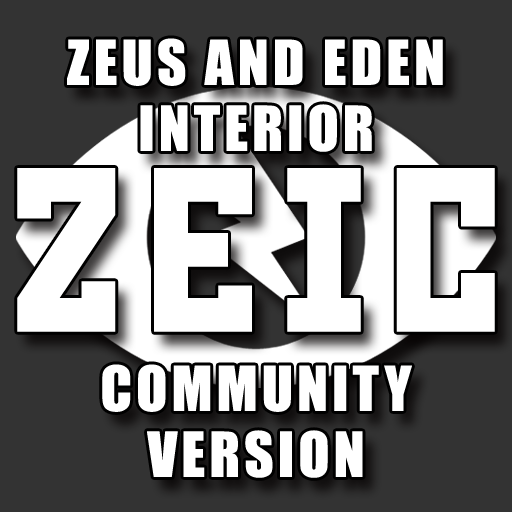
<style>
.page{position:relative;width:512px;height:512px;background:#ffffff}
.page>*{position:absolute;margin:0}
.t1{font:57.3px/65.9px "Impact";letter-spacing:0.07em;color:#ffffff;text-transform:uppercase}
.t2{font:222.6px "KonstruktorRegular";letter-spacing:0.07em;color:#ffffff;text-transform:uppercase}
</style>
<div class="page">
<p class="t1" style="left:67px;top:38px;width:376px;height:114px;text-align:center">Zeus and eden<br>interior</p>
<p class="t2" style="left:17px;top:168px;width:478px;height:164px">ZEIC</p>
<p class="t1" style="left:102px;top:364px;width:310px;height:114px;text-align:center">Community<br>Version</p>
</div>
